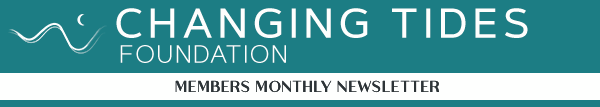
<style>
.page{position:relative;width:600px;height:107px;background:#1c7d84}
.page>*{position:absolute;margin:0}
.t1{font:41.7px "ArtegraSansMedium";letter-spacing:0.1em;color:#fdfefd}
.t2{font:25px "ArtegraSansLight";letter-spacing:0.025em;color:#fdfefd}
.t3{font:16.7px "Athena-Regular";color:#2d3437}
</style>
<div class="page">
<p class="t1" style="left:116px;top:8px;width:412px;height:30px">CHANGING TIDES</p>
<p class="t2" style="left:120px;top:45px;width:166px;height:18px">FOUNDATION</p>
<p class="t3" style="left:175px;top:80px;width:264px;height:13px">MEMBERS MONTHLY NEWSLETTER</p>
</div>
